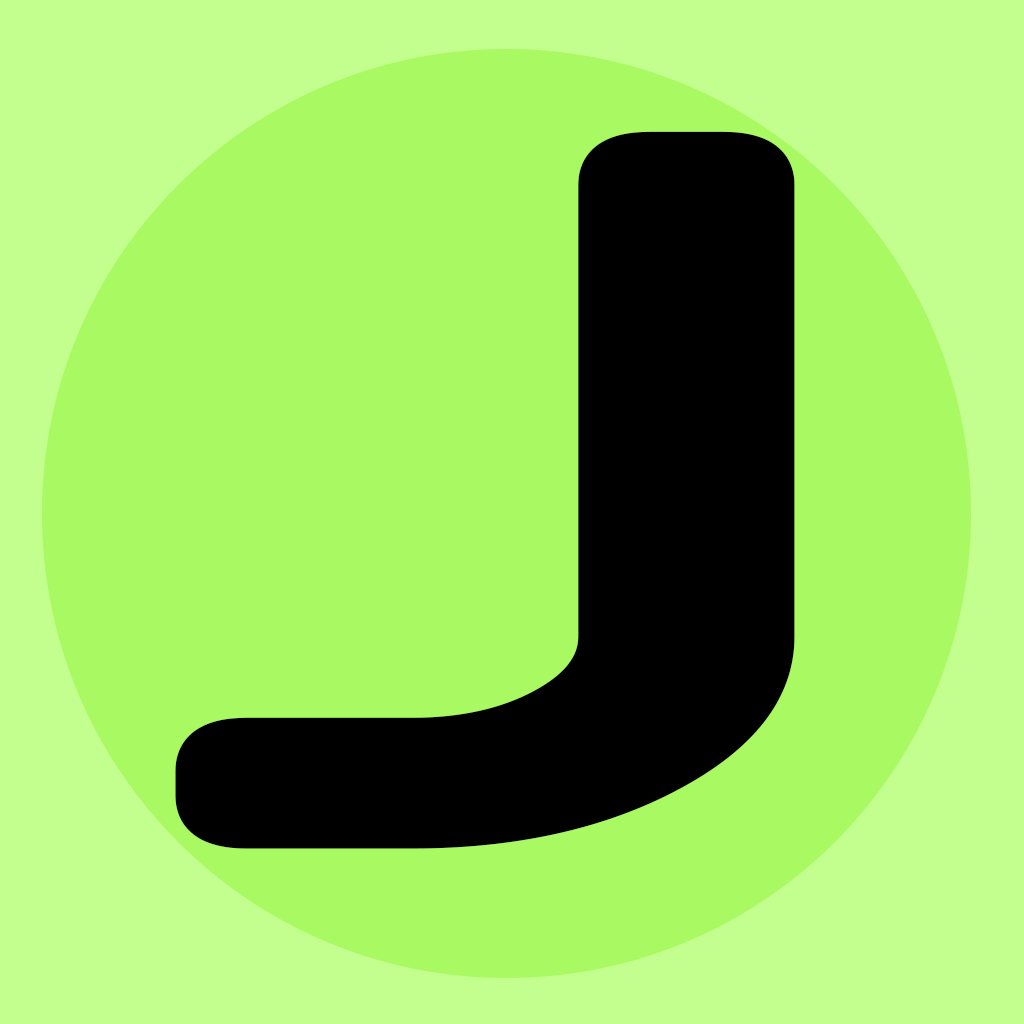
<style>
.page{position:relative;width:1024px;height:1024px;background:#a9f962}
.page>*{position:absolute;margin:0}
.t1{font:1000px "Downlink";letter-spacing:-0.04em;color:#000000;font-variant:small-caps;font-weight:bold;scale:1.5 1}
</style>
<div class="page">
<p class="t1" style="left:175px;top:131px;width:620px;height:718px">J</p>
</div>
